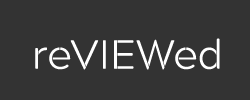
<style>
.page{position:relative;width:250px;height:100px;background:#333333}
.page>*{position:absolute;margin:0}
.t1{font:40.6px "AcherusMilitant1-Light";color:#ffffff}
</style>
<div class="page">
<p class="t1" style="left:35px;top:38px;width:185px;height:32px">reVIEWed</p>
</div>
